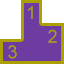
<style>
.page{position:relative;width:64px;height:64px;background:#6d3ca0}
.page>*{position:absolute;margin:0}
.t1{font:18px "ArialMT";color:#aba000}
</style>
<div class="page">
<p class="t1" style="left:28px;top:6px;width:5px;height:13px">1</p>
<p class="t1" style="left:48px;top:29px;width:9px;height:14px">2</p>
<p class="t1" style="left:8px;top:45px;width:9px;height:14px">3</p>
</div>
